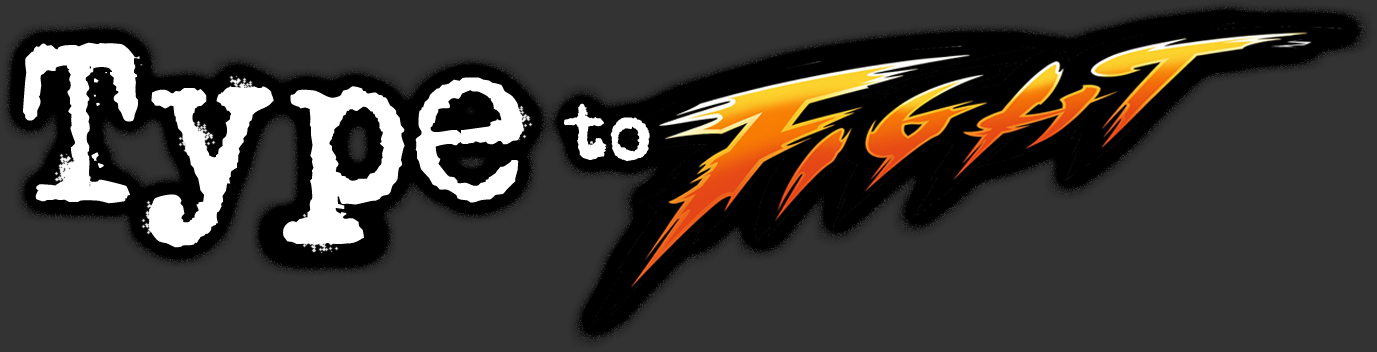
<style>
.page{position:relative;width:1377px;height:352px;background:#333333}
.page>*{position:absolute;margin:0}
.t1{font:200px "MomsTypewriter";color:#ffffff}
.t2{font:72px "MomsTypewriter";color:#ffffff}
</style>
<div class="page">
<p class="t1" style="left:23px;top:42px;width:501px;height:206px">Type</p>
<p class="t2" style="left:564px;top:103px;width:86px;height:58px">to</p>
</div>
